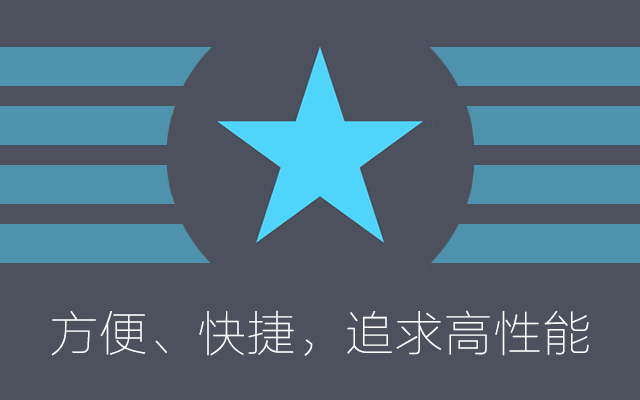
<style>
.page{position:relative;width:640px;height:400px;background:#4d505d}
.page>*{position:absolute;margin:0}
.t1{font:48px "FZLTCXHJW--GB1-0";color:#ffffff;font-weight:bold}
</style>
<div class="page">
<p class="t1" style="left:51px;top:310px;width:538px;height:46px">方便、快捷，追求高性能</p>
</div>
